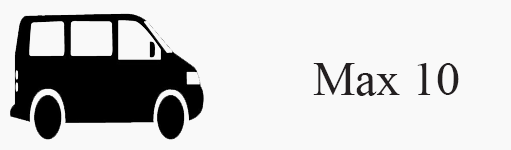
<style>
.page{position:relative;width:511px;height:150px;background:#f9f9f9}
.page>*{position:absolute;margin:0}
.t1{font:48px "TimesNewRomanPSMT";color:#231f20}
</style>
<div class="page">
<p class="t1" style="left:313px;top:63px;width:146px;height:33px">Max 10</p>
</div>
